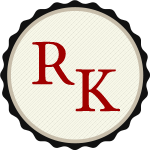
<style>
.page{position:relative;width:150px;height:150px;background:#ffffff}
.page>*{position:absolute;margin:0}
.t1{font:64px "ETBembo-RomanLF";color:#a00000}
</style>
<div class="page">
<p class="t1" style="left:32px;top:41px;width:43px;height:44px">R</p>
<p class="t1" style="left:75px;top:69px;width:46px;height:43px">K</p>
</div>
